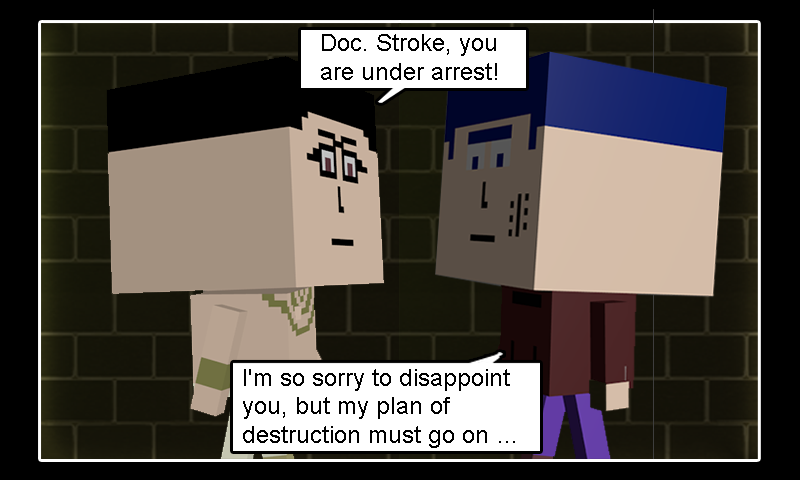
<style>
.page{position:relative;width:800px;height:480px;background:#000000}
.page>*{position:absolute;margin:0}
.t1{font:24px "ArialMT";color:#000000}
</style>
<div class="page">
<p class="t1" style="left:321px;top:34px;width:176px;height:46px">Doc. Stroke, you<br>are under arrest!</p>
<p class="t1" style="left:243px;top:369px;width:272px;height:79px">I'm so sorry to disappoint<br>you, but my plan of<br>destruction must go on …</p>
</div>
